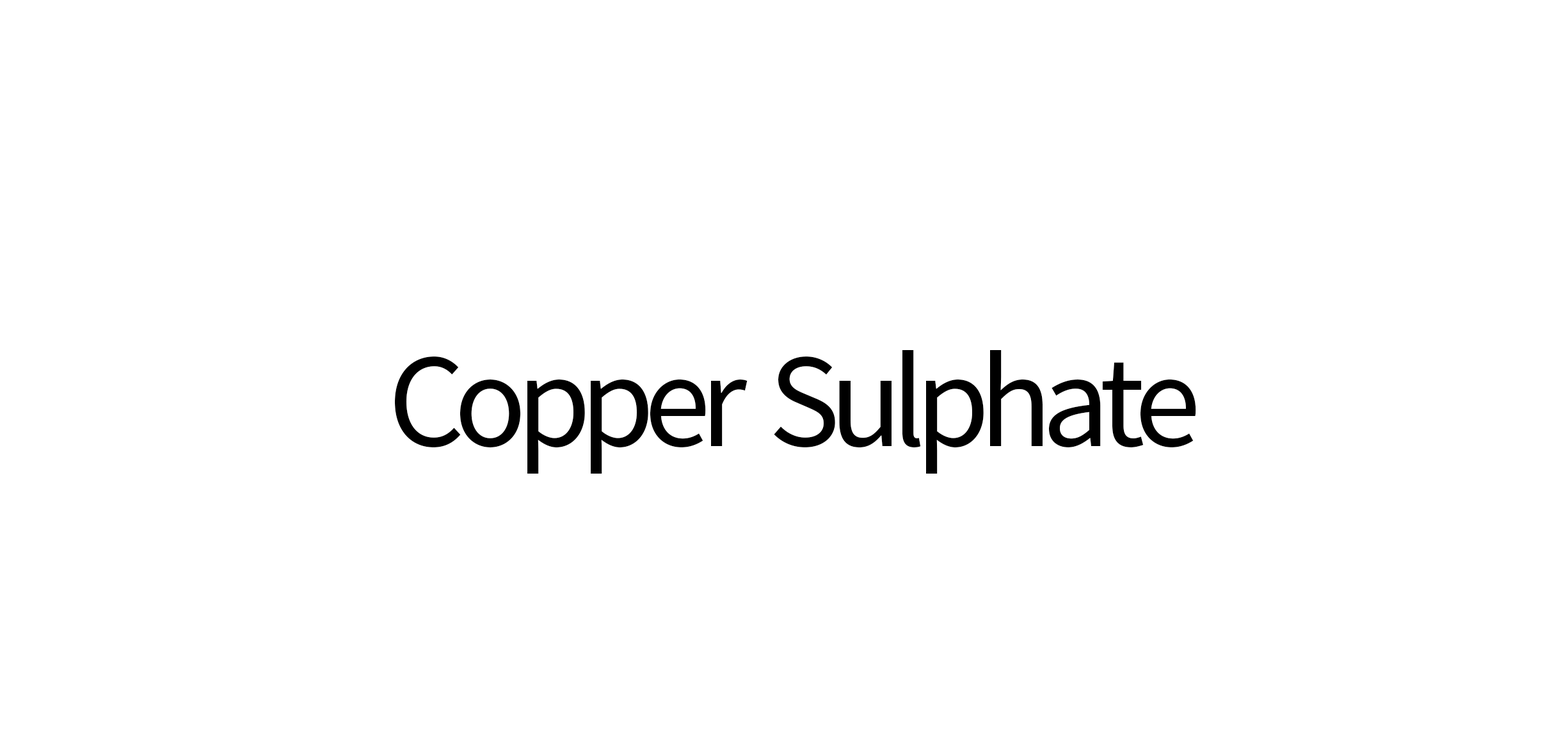
<style>
.page{position:relative;width:1568px;height:752px;background:#ffffff}
.page>*{position:absolute;margin:0}
.t1{font:134.5px "SourceSansPro-Regular";letter-spacing:-0.08em;color:#000000}
</style>
<div class="page">
<p class="t1" style="left:395px;top:350px;width:801px;height:124px">Copper  Sulphate</p>
</div>
